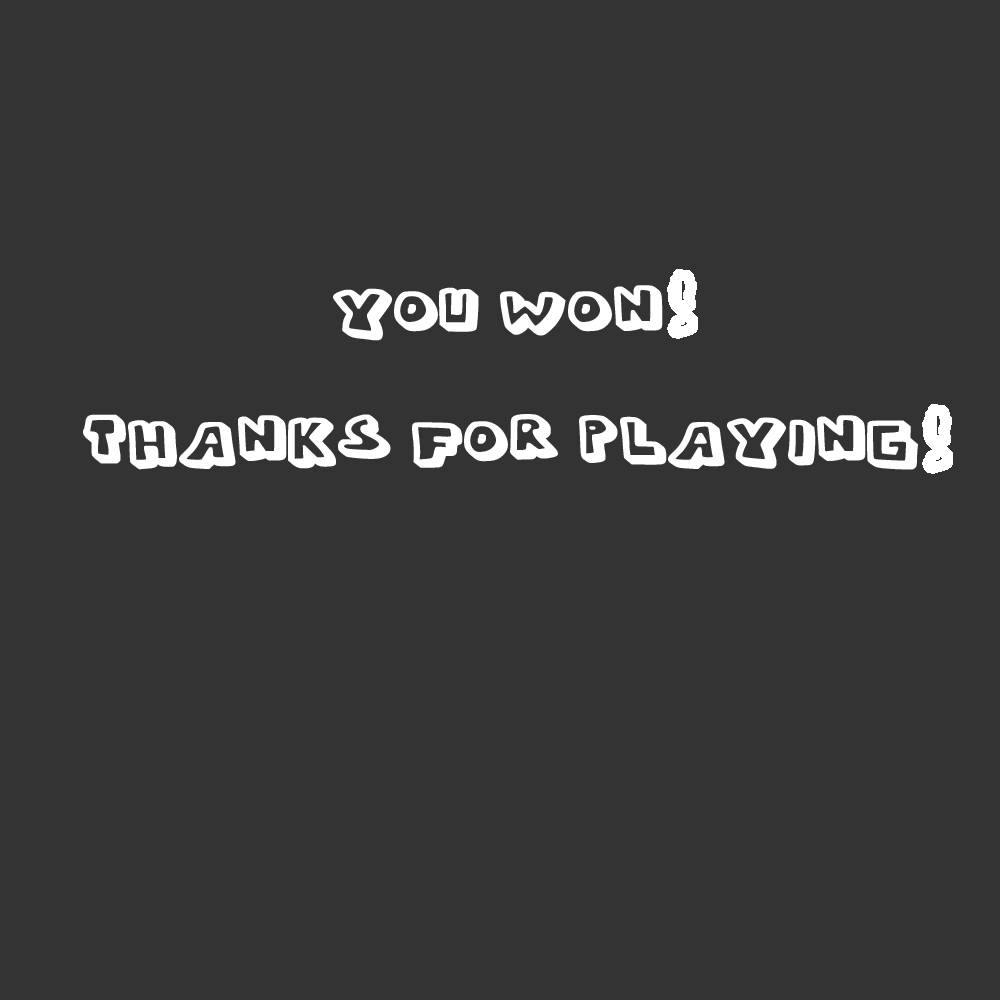
<style>
.page{position:relative;width:1000px;height:1000px;background:#333333}
.page>*{position:absolute;margin:0}
.t1{font:66.7px/54.2px "Whypo";color:#ffffff;font-weight:bold;scale:1.08 1}
</style>
<div class="page">
<p class="t1" style="left:83px;top:285px;width:835px;height:185px;text-align:center">You won!<br><br>Thanks for playing</p>
</div>
